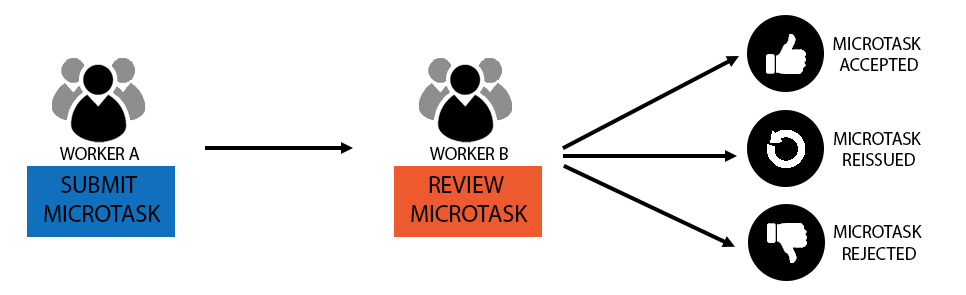
<style>
.page{position:relative;width:966px;height:295px;background:#ffffff}
.page>*{position:absolute;margin:0}
.t1{font:18px "MyriadPro-Regular";color:#030303}
.t2{font:24px "MyriadPro-Regular";color:#030303}
</style>
<div class="page">
<p class="t1" style="left:833px;top:37px;width:88px;height:34px;text-align:center">MICROTASK <br>ACCEPTED</p>
<p class="t1" style="left:834px;top:132px;width:87px;height:34px;text-align:center">MICROTASK <br>REISSUED</p>
<p class="t1" style="left:60px;top:147px;width:80px;height:13px">WORKER A</p>
<p class="t1" style="left:430px;top:147px;width:78px;height:13px">WORKER B</p>
<p class="t2" style="left:44px;top:176px;width:117px;height:46px;text-align:center">SUBMIT <br>MICROTASK</p>
<p class="t2" style="left:411px;top:176px;width:117px;height:46px;text-align:center">REVIEW <br>MICROTASK</p>
<p class="t1" style="left:834px;top:225px;width:88px;height:35px;text-align:center">MICROTASK <br>REJECTED</p>
</div>
